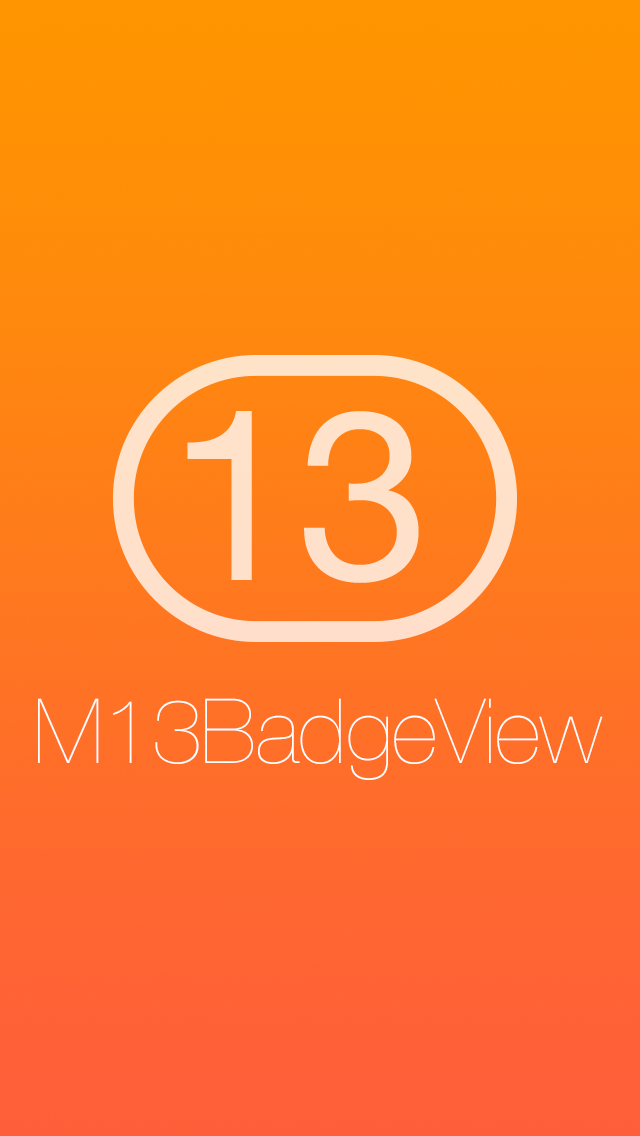
<style>
.page{position:relative;width:640px;height:1136px}
.page>*{position:absolute;margin:0}
.t1{font:238.2px "HelveticaNeue";letter-spacing:-0.007em;color:#ffe1ca}
.t2{font:90px "HelveticaNeue-UltraLight";letter-spacing:-0.007em;color:#ffffff}
</style>
<div class="page">
<p class="t1" style="left:187px;top:411px;width:232px;height:172px">13</p>
<p class="t2" style="left:38px;top:698px;width:565px;height:82px">M13BadgeView</p>
</div>
